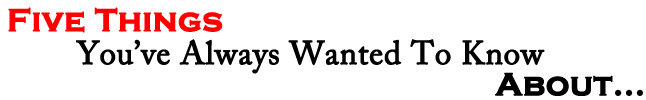
<style>
.page{position:relative;width:646px;height:100px;background:#ffffff}
.page>*{position:absolute;margin:0}
.t1{font:32.7px "CopperplateGothic-Bold";color:#ff0000;font-weight:bold}
.t2{font:32.7px "ACaslonPro-Regular";color:#000000;font-weight:bold}
.t3{font:32.7px "CopperplateGothic-Bold";color:#000000;font-weight:bold}
</style>
<div class="page">
<p class="t1" style="left:8px;top:7px;width:215px;height:26px">Five Things</p>
<p class="t2" style="left:76px;top:39px;width:469px;height:35px">You’ve Always Wanted To Know</p>
<p class="t3" style="left:495px;top:72px;width:148px;height:24px">About...</p>
</div>
